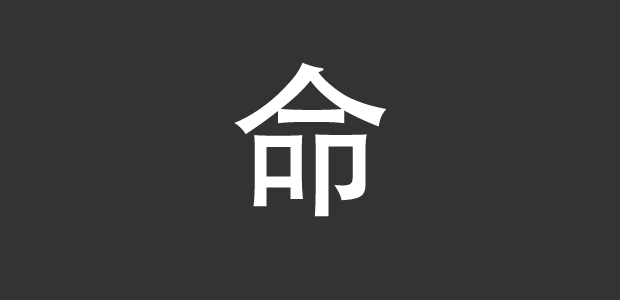
<style>
.page{position:relative;width:620px;height:300px;background:#333333}
.page>*{position:absolute;margin:0}
.t1{font:160px "AdobeHeitiStd-Regular";color:#ffffff}
</style>
<div class="page">
<p class="t1" style="left:234px;top:62px;width:152px;height:155px">命</p>
</div>
